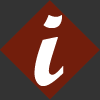
<style>
.page{position:relative;width:100px;height:100px;background:#333333}
.page>*{position:absolute;margin:0}
.t1{font:116px "ScriptMTBold";color:#ffffff}
</style>
<div class="page">
<p class="t1" style="left:34px;top:15px;width:30px;height:71px">i</p>
</div>
